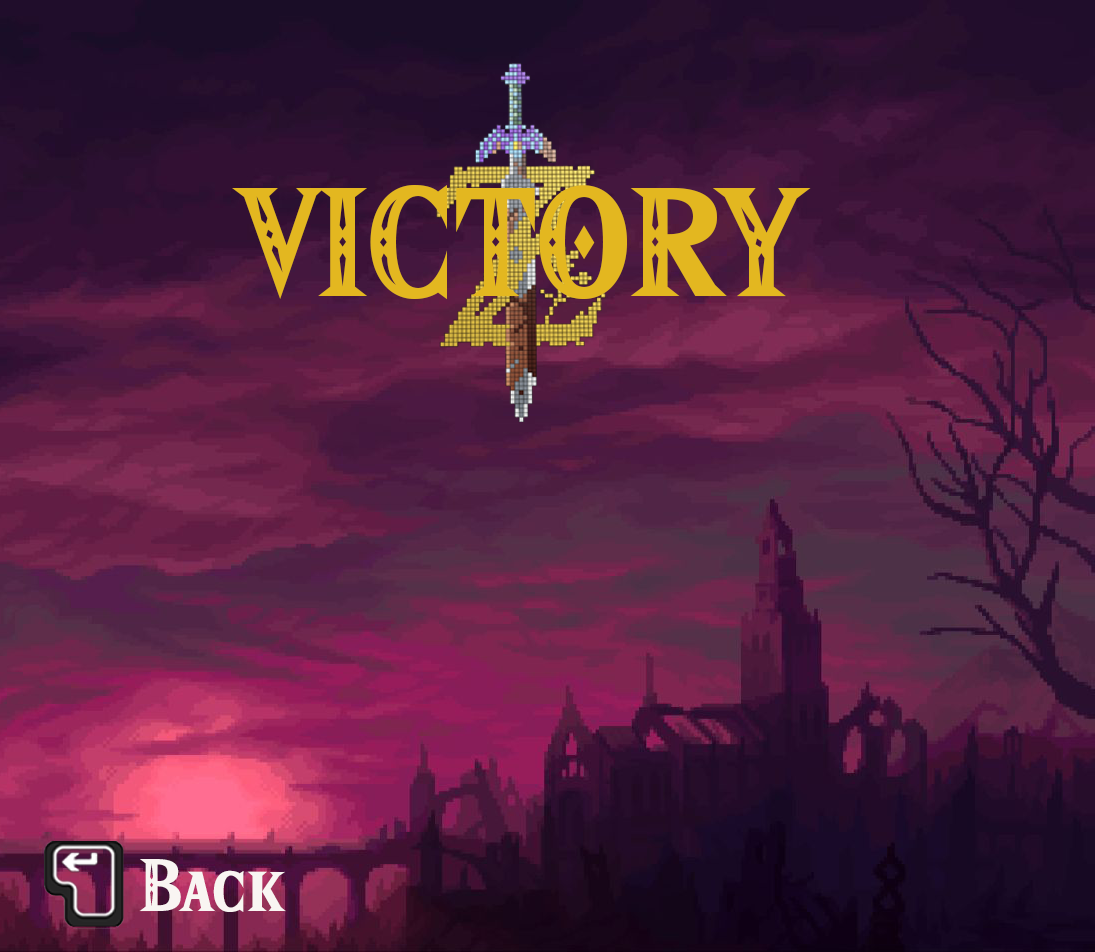
<style>
.page{position:relative;width:1095px;height:952px}
.page>*{position:absolute;margin:0}
.t1{font:135px "HyliaSerifBeta-Regular";color:#e3b720}
.t2{font:65px "HyliaSerifBeta-Regular";color:#f9f5f2}
</style>
<div class="page">
<p class="t1" style="left:232px;top:185px;width:579px;height:115px">VICTORY</p>
<p class="t2" style="left:139px;top:859px;width:147px;height:53px">Back</p>
</div>
